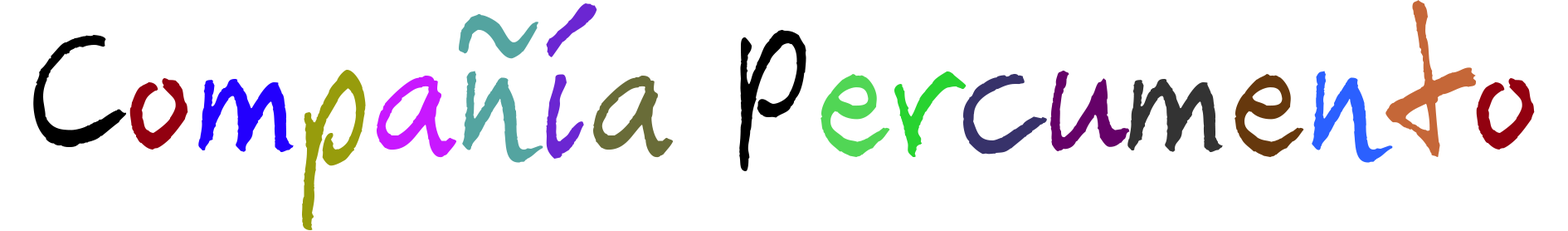
<style>
.page{position:relative;width:1568px;height:231px;background:#ffffff}
.page>*{position:absolute;margin:0}
.t1{font:207.4px "Carbax";color:#000000}
.t2{font:207.4px "Carbax";color:#920010}
.t3{font:207.4px "Carbax";color:#2300fd}
.t4{font:207.4px "Carbax";color:#979c0c}
.t5{font:207.4px "Carbax";color:#c818ff}
.t6{font:207.4px "Carbax";color:#54a4a0}
.t7{font:207.4px "Carbax";color:#6b26d2}
.t8{font:207.4px "Carbax";color:#696c38}
.t9{font:207.4px "Carbax";color:#51d655}
.t10{font:207.4px "Carbax";color:#28d330}
.t11{font:207.4px "Carbax";color:#37326a}
.t12{font:207.4px "Carbax";color:#650168}
.t13{font:207.4px "Carbax";color:#333333}
.t14{font:207.4px "Carbax";color:#66380d}
.t15{font:207.4px "Carbax";color:#2b60ff}
.t16{font:207.4px "Carbax";color:#c56738}
.t17{font:207.4px "Carbax";color:#920110}
</style>
<div class="page">
<p class="t1" style="left:33px;top:0px;width:1502px;height:230px">C<span class="t2">o</span><span class="t3">m</span><span class="t4">p</span><span class="t5">a</span><span class="t6">ñ</span><span class="t7">í</span><span class="t8">a</span> P<span class="t9">e</span><span class="t10">r</span><span class="t11">c</span><span class="t12">u</span><span class="t13">m</span><span class="t14">e</span><span class="t15">n</span><span class="t16">t</span><span class="t17">o</span></p>
</div>
